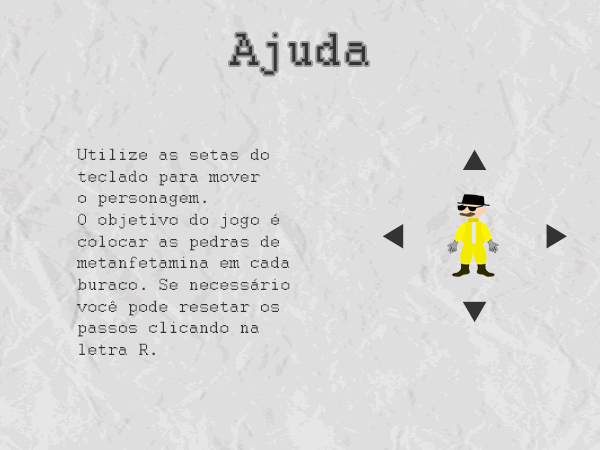
<style>
.page{position:relative;width:600px;height:450px;background:#dedede}
.page>*{position:absolute;margin:0}
.t1{font:50px "Courier";color:#333333}
.t2{font:18.1px "Courier";color:#333333}
</style>
<div class="page">
<p class="t1" style="left:230px;top:33px;width:138px;height:42px">Ajuda</p>
<p class="t2" style="left:77px;top:148px;width:213px;height:207px">Utilize as setas do<br>teclado para mover <br>o personagem.<br>O objetivo do jogo é<br>colocar as pedras de<br>metanfetamina em cada<br>buraco. Se necessário<br>você pode resetar os <br>passos clicando na <br>letra R.</p>
</div>
